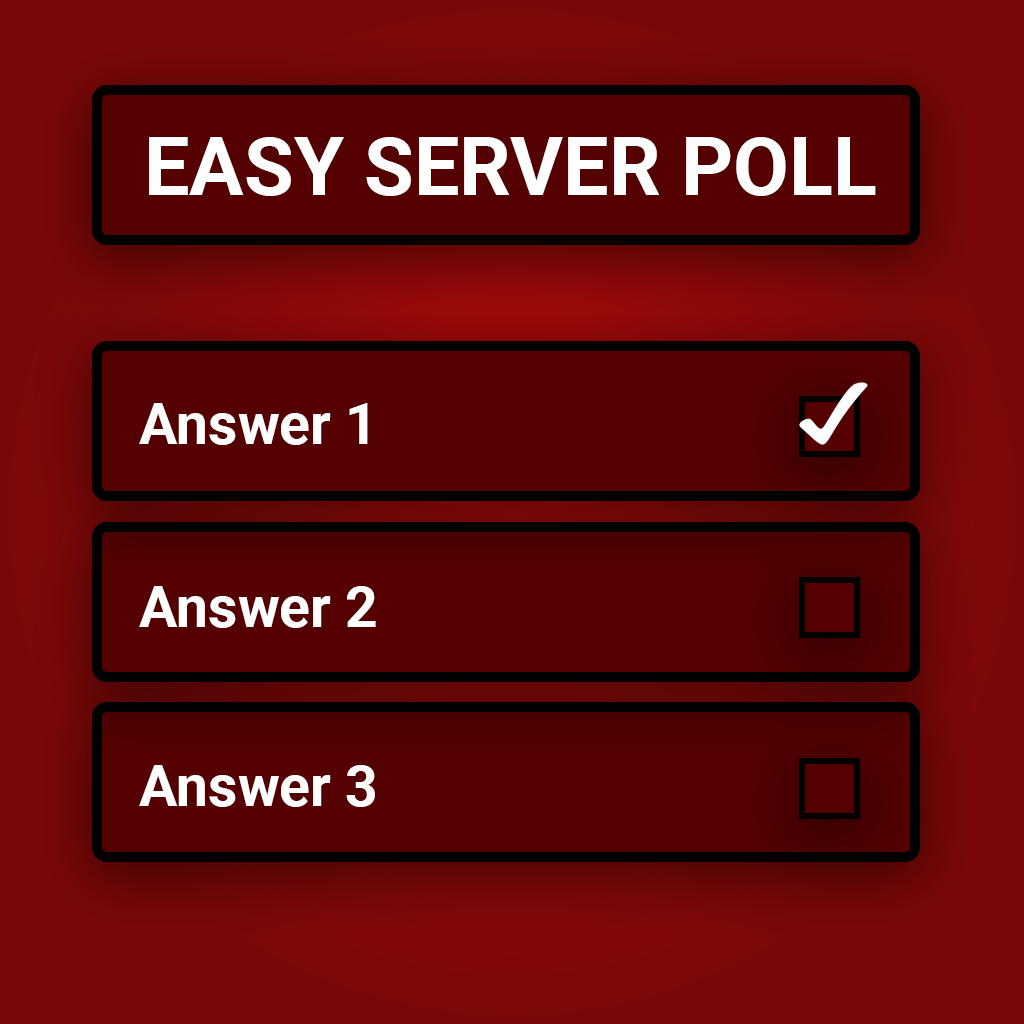
<style>
.page{position:relative;width:1024px;height:1024px;background:#540000}
.page>*{position:absolute;margin:0}
.t1{font:81px "Roboto-Bold";color:#ffffff}
.t2{font:57px "Roboto-Bold";color:#ffffff}
</style>
<div class="page">
<p class="t1" style="left:149px;top:137px;width:727px;height:59px">EASY SERVER POLL</p>
<p class="t2" style="left:139px;top:403px;width:229px;height:42px">Answer 1</p>
<p class="t2" style="left:139px;top:586px;width:237px;height:42px">Answer 2</p>
<p class="t2" style="left:139px;top:765px;width:236px;height:42px">Answer 3</p>
</div>
